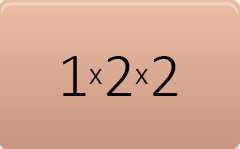
<style>
.page{position:relative;width:240px;height:149px}
.page>*{position:absolute;margin:0}
.t1{font:64px "Calibri-Light";color:#000000}
.t2{font:32px "Calibri-Light";color:#000000}
</style>
<div class="page">
<p class="t1" style="left:62px;top:56px;width:116px;height:40px">1<span class="t2">x</span>2<span class="t2">x</span>2</p>
</div>
